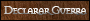
<style>
.page{position:relative;width:90px;height:21px}
.page>*{position:absolute;margin:0}
.t1{font:12px "Mason-Regular";letter-spacing:-0.1em;scale:1.03 1}
</style>
<div class="page">
<p class="t1" style="left:4px;top:6px;width:83px;height:9px">Declarar Guerra</p>
</div>
